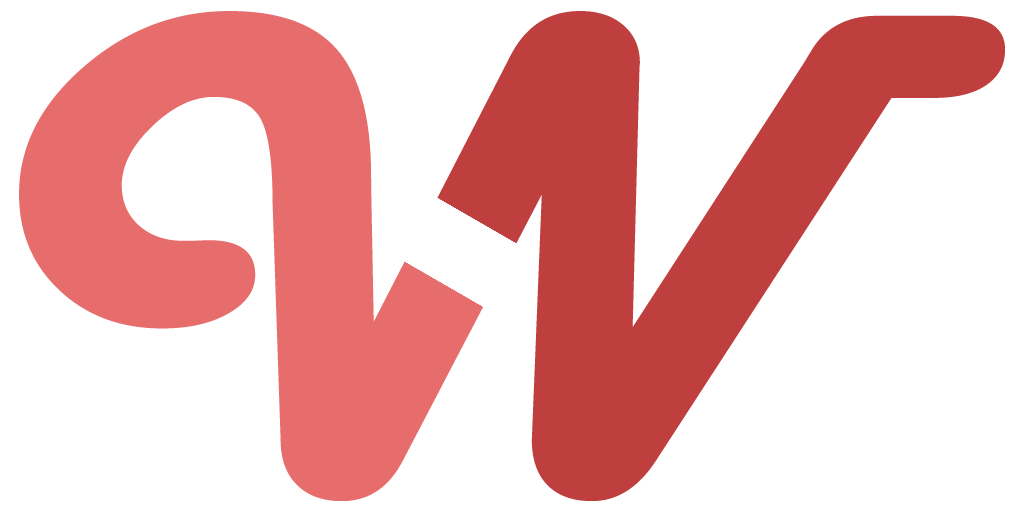
<style>
.page{position:relative;width:1024px;height:512px;background:#ffffff}
.page>*{position:absolute;margin:0}
.t1{font:701.6px "HarlowSolid";scale:1.12 1}
</style>
<div class="page">
<p class="t1" style="left:19px;top:11px;width:986px;height:490px">W</p>
<p class="t1" style="left:19px;top:11px;width:986px;height:490px">W</p>
</div>
